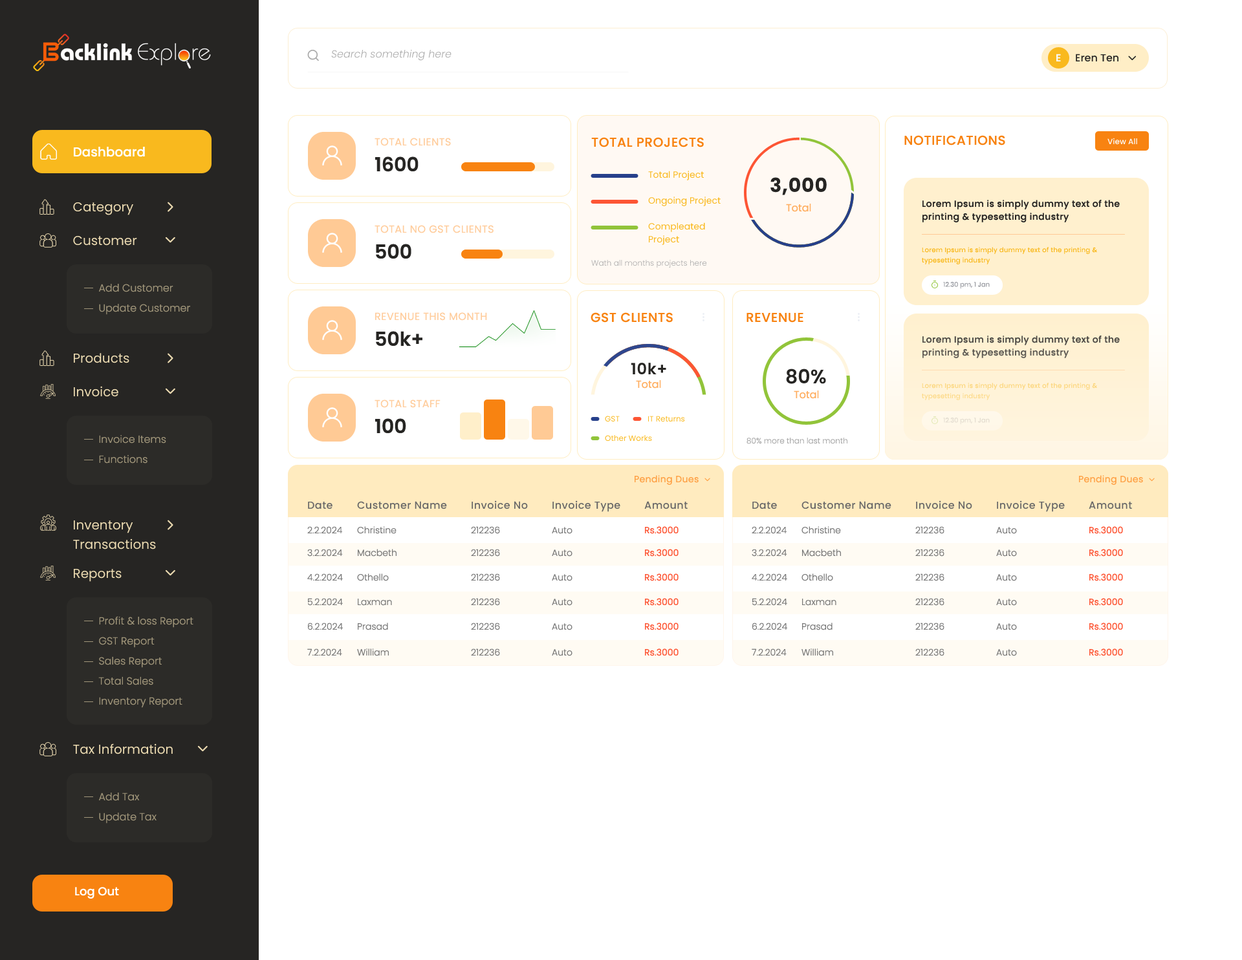
<style>
.page{position:relative;width:1242px;height:960px;background:#ffffff}
.page>*{position:absolute;margin:0}
.t1{font:10.3px "Poppins-LightItalic";color:#aaaaaa}
.t2{font:10.3px "Poppins-SemiBold";color:#f7f9fd}
.t3{font:10.3px "Poppins-Medium";color:#262523}
.t4{font:10.3px "Poppins-Regular";letter-spacing:0.03em;color:#ffcd9d;text-transform:uppercase}
.t5{font:12.9px "Poppins-Medium";letter-spacing:0.03em;color:#f88311;text-transform:uppercase}
.t6{font:7.8px "Poppins-Medium";color:#fcfdfe}
.t7{font:12.9px "Poppins-Medium";color:#ffffff}
.t8{font:19.4px "Poppins-SemiBold";color:#262523}
.t9{font:9.1px "Poppins-Regular";color:#f9b91e}
.t10{font:19.4px "Poppins-Bold";letter-spacing:0.03em;color:#262523}
.t11{font:12.9px "Poppins-Regular";color:#eddcb2}
.t12{font:10.3px "Poppins-Regular";color:#ffae60}
.t13{font:9.1px/12.9px "Poppins-Medium";letter-spacing:0.03em;color:#262523}
.t14{font:9.1px/12.9px "Poppins-Regular";color:#f9b91e}
.t15{font:6.5px/10.3px "Poppins-Regular";letter-spacing:0.03em;color:#f9b91e}
.t16{font:7.8px "Poppins-Light";color:#aaaaaa}
.t17{font:6.5px "Poppins-Regular";color:#9b9da3}
.t18{font:10.3px "Poppins-Light";color:#a1967a}
.t19{font:9.1px/12.9px "Poppins-Medium";letter-spacing:0.03em;color:#504d48}
.t20{font:15.5px "Poppins-SemiBold";letter-spacing:0.03em;color:#262523}
.t21{font:6.5px/10.3px "Poppins-Regular";letter-spacing:0.03em;color:#fcd67e}
.t22{font:7.8px "Poppins-Regular";color:#f9b91e}
.t23{font:6.5px "Poppins-Regular";color:#e3dccf}
.t24{font:9.1px "Poppins-Regular";letter-spacing:0.03em;color:#fea044}
.t25{font:9.1px "Poppins-Regular";letter-spacing:0.03em;color:#ffa044}
.t26{font:10.3px "Poppins-Medium";letter-spacing:0.03em;color:#686868}
.t27{font:12.9px/19.4px "Poppins-Regular";color:#eddcb2}
.t28{font:9.1px "Poppins-Light";color:#777777}
.t29{font:9.1px "Poppins-Regular";color:#fd5534}
.t30{font:11.6px "Poppins-Medium";color:#ffffff}
</style>
<div class="page">
<p class="t1" style="left:331px;top:50px;width:120px;height:11px">Search something here</p>
<p class="t2" style="left:1056px;top:54px;width:5px;height:7px">E</p>
<p class="t3" style="left:1075px;top:54px;width:43px;height:8px">Eren Ten</p>
<p class="t4" style="left:374px;top:138px;width:77px;height:8px">Total Clients</p>
<p class="t5" style="left:591px;top:137px;width:113px;height:10px">Total projects</p>
<p class="t5" style="left:904px;top:135px;width:101px;height:11px">notifications</p>
<p class="t6" style="left:1107px;top:138px;width:30px;height:6px">View All</p>
<p class="t7" style="left:74px;top:147px;width:71px;height:10px">Dashboard</p>
<p class="t8" style="left:375px;top:157px;width:43px;height:15px">1600</p>
<p class="t9" style="left:648px;top:171px;width:56px;height:9px">Total Project</p>
<p class="t10" style="left:770px;top:177px;width:56px;height:18px">3,000</p>
<p class="t9" style="left:648px;top:197px;width:72px;height:9px">Ongoing Project</p>
<p class="t11" style="left:73px;top:202px;width:60px;height:13px">Category</p>
<p class="t12" style="left:786px;top:204px;width:25px;height:8px">Total</p>
<p class="t13" style="left:922px;top:200px;width:197px;height:22px">Lorem Ipsum is simply dummy text of the<br>printing &amp; typesetting industry</p>
<p class="t4" style="left:374px;top:225px;width:119px;height:8px">Total no gst clients</p>
<p class="t14" style="left:648px;top:222px;width:57px;height:23px">Compleated<br>Project</p>
<p class="t11" style="left:73px;top:236px;width:64px;height:10px">Customer</p>
<p class="t8" style="left:376px;top:244px;width:35px;height:15px">500</p>
<p class="t15" style="left:922px;top:247px;width:175px;height:18px">Lorem Ipsum is simply dummy text of the printing &amp;<br>typesetting industry</p>
<p class="t16" style="left:591px;top:260px;width:116px;height:8px">Wath all months projects here</p>
<p class="t17" style="left:943px;top:282px;width:46px;height:7px">12.30 pm, 1 Jan</p>
<p class="t18" style="left:99px;top:284px;width:74px;height:8px">Add Customer</p>
<p class="t18" style="left:99px;top:304px;width:91px;height:11px">Update Customer</p>
<p class="t4" style="left:375px;top:312px;width:112px;height:9px">Revenue this month</p>
<p class="t5" style="left:590px;top:312px;width:83px;height:11px">gst clients</p>
<p class="t5" style="left:746px;top:313px;width:57px;height:10px">revenue</p>
<p class="t8" style="left:376px;top:331px;width:46px;height:15px">50k+</p>
<p class="t19" style="left:922px;top:336px;width:197px;height:22px">Lorem Ipsum is simply dummy text of the<br>printing &amp; typesetting industry</p>
<p class="t11" style="left:74px;top:353px;width:55px;height:10px">Products</p>
<p class="t20" style="left:631px;top:363px;width:35px;height:11px">10k+</p>
<p class="t8" style="left:786px;top:369px;width:40px;height:15px">80%</p>
<p class="t11" style="left:74px;top:386px;width:44px;height:11px">Invoice</p>
<p class="t12" style="left:636px;top:380px;width:25px;height:9px">Total</p>
<p class="t21" style="left:922px;top:383px;width:175px;height:17px">Lorem Ipsum is simply dummy text of the printing &amp;<br>typesetting industry</p>
<p class="t4" style="left:374px;top:400px;width:66px;height:8px">Total staff</p>
<p class="t12" style="left:794px;top:391px;width:25px;height:8px">Total</p>
<p class="t8" style="left:375px;top:418px;width:31px;height:15px">100</p>
<p class="t22" style="left:605px;top:416px;width:15px;height:6px">GST</p>
<p class="t22" style="left:648px;top:416px;width:37px;height:6px">IT Returns</p>
<p class="t23" style="left:943px;top:418px;width:46px;height:7px">12.30 pm, 1 Jan</p>
<p class="t18" style="left:99px;top:435px;width:67px;height:9px">Invoice Items</p>
<p class="t22" style="left:605px;top:435px;width:47px;height:6px">Other Works</p>
<p class="t16" style="left:746px;top:438px;width:101px;height:6px">80% more than last month</p>
<p class="t18" style="left:99px;top:455px;width:48px;height:9px">Functions</p>
<p class="t24" style="left:634px;top:475px;width:64px;height:10px">Pending Dues</p>
<p class="t25" style="left:1079px;top:475px;width:64px;height:10px">Pending Dues</p>
<p class="t26" style="left:308px;top:502px;width:24px;height:8px">Date</p>
<p class="t26" style="left:357px;top:501px;width:90px;height:9px">Customer Name</p>
<p class="t26" style="left:471px;top:501px;width:57px;height:9px">Invoice No</p>
<p class="t26" style="left:552px;top:501px;width:68px;height:11px">Invoice Type</p>
<p class="t26" style="left:644px;top:501px;width:43px;height:9px">Amount</p>
<p class="t26" style="left:752px;top:502px;width:25px;height:8px">Date</p>
<p class="t26" style="left:801px;top:501px;width:90px;height:9px">Customer Name</p>
<p class="t26" style="left:916px;top:501px;width:56px;height:9px">Invoice No</p>
<p class="t26" style="left:997px;top:501px;width:67px;height:11px">Invoice Type</p>
<p class="t26" style="left:1088px;top:501px;width:44px;height:9px">Amount</p>
<p class="t27" style="left:73px;top:521px;width:83px;height:29px">Inventory<br>Transactions</p>
<p class="t28" style="left:307px;top:526px;width:35px;height:8px">2.2.2024</p>
<p class="t28" style="left:357px;top:526px;width:39px;height:8px">Christine</p>
<p class="t28" style="left:471px;top:526px;width:29px;height:8px">212236</p>
<p class="t28" style="left:552px;top:527px;width:20px;height:7px">Auto</p>
<p class="t29" style="left:645px;top:526px;width:33px;height:8px">Rs.3000</p>
<p class="t28" style="left:751px;top:526px;width:35px;height:8px">2.2.2024</p>
<p class="t28" style="left:801px;top:526px;width:40px;height:8px">Christine</p>
<p class="t28" style="left:915px;top:526px;width:29px;height:8px">212236</p>
<p class="t28" style="left:996px;top:527px;width:21px;height:7px">Auto</p>
<p class="t29" style="left:1089px;top:526px;width:34px;height:8px">Rs.3000</p>
<p class="t28" style="left:307px;top:549px;width:36px;height:8px">3.2.2024</p>
<p class="t28" style="left:358px;top:549px;width:38px;height:8px">Macbeth</p>
<p class="t28" style="left:471px;top:549px;width:29px;height:8px">212236</p>
<p class="t28" style="left:552px;top:550px;width:20px;height:7px">Auto</p>
<p class="t29" style="left:645px;top:549px;width:33px;height:8px">Rs.3000</p>
<p class="t28" style="left:751px;top:549px;width:36px;height:8px">3.2.2024</p>
<p class="t28" style="left:802px;top:549px;width:39px;height:8px">Macbeth</p>
<p class="t28" style="left:915px;top:549px;width:29px;height:8px">212236</p>
<p class="t28" style="left:996px;top:550px;width:21px;height:7px">Auto</p>
<p class="t29" style="left:1089px;top:549px;width:34px;height:8px">Rs.3000</p>
<p class="t11" style="left:74px;top:569px;width:48px;height:13px">Reports</p>
<p class="t28" style="left:307px;top:574px;width:36px;height:7px">4.2.2024</p>
<p class="t28" style="left:357px;top:574px;width:32px;height:7px">Othello</p>
<p class="t28" style="left:471px;top:574px;width:29px;height:7px">212236</p>
<p class="t28" style="left:552px;top:574px;width:20px;height:7px">Auto</p>
<p class="t29" style="left:645px;top:574px;width:33px;height:7px">Rs.3000</p>
<p class="t28" style="left:751px;top:574px;width:36px;height:7px">4.2.2024</p>
<p class="t28" style="left:801px;top:574px;width:32px;height:7px">Othello</p>
<p class="t28" style="left:915px;top:574px;width:29px;height:7px">212236</p>
<p class="t28" style="left:996px;top:574px;width:21px;height:7px">Auto</p>
<p class="t29" style="left:1089px;top:574px;width:34px;height:7px">Rs.3000</p>
<p class="t28" style="left:308px;top:598px;width:35px;height:8px">5.2.2024</p>
<p class="t28" style="left:358px;top:599px;width:34px;height:7px">Laxman</p>
<p class="t28" style="left:471px;top:598px;width:29px;height:8px">212236</p>
<p class="t28" style="left:552px;top:599px;width:20px;height:7px">Auto</p>
<p class="t29" style="left:645px;top:598px;width:33px;height:8px">Rs.3000</p>
<p class="t28" style="left:752px;top:598px;width:35px;height:8px">5.2.2024</p>
<p class="t28" style="left:802px;top:599px;width:34px;height:7px">Laxman</p>
<p class="t28" style="left:915px;top:598px;width:29px;height:8px">212236</p>
<p class="t28" style="left:996px;top:599px;width:21px;height:7px">Auto</p>
<p class="t29" style="left:1089px;top:598px;width:34px;height:8px">Rs.3000</p>
<p class="t18" style="left:99px;top:616px;width:94px;height:12px">Profit &amp; loss Report</p>
<p class="t28" style="left:308px;top:623px;width:35px;height:8px">6.2.2024</p>
<p class="t28" style="left:358px;top:623px;width:30px;height:8px">Prasad</p>
<p class="t28" style="left:471px;top:623px;width:29px;height:8px">212236</p>
<p class="t28" style="left:552px;top:623px;width:20px;height:8px">Auto</p>
<p class="t29" style="left:645px;top:623px;width:33px;height:8px">Rs.3000</p>
<p class="t28" style="left:752px;top:623px;width:35px;height:8px">6.2.2024</p>
<p class="t28" style="left:802px;top:623px;width:30px;height:8px">Prasad</p>
<p class="t28" style="left:915px;top:623px;width:29px;height:8px">212236</p>
<p class="t28" style="left:996px;top:623px;width:21px;height:8px">Auto</p>
<p class="t29" style="left:1089px;top:623px;width:34px;height:8px">Rs.3000</p>
<p class="t18" style="left:99px;top:637px;width:56px;height:11px">GST Report</p>
<p class="t28" style="left:307px;top:649px;width:35px;height:7px">7.2.2024</p>
<p class="t28" style="left:357px;top:649px;width:32px;height:7px">William</p>
<p class="t28" style="left:471px;top:649px;width:29px;height:7px">212236</p>
<p class="t28" style="left:552px;top:649px;width:20px;height:7px">Auto</p>
<p class="t29" style="left:645px;top:649px;width:33px;height:7px">Rs.3000</p>
<p class="t28" style="left:751px;top:649px;width:35px;height:7px">7.2.2024</p>
<p class="t28" style="left:801px;top:649px;width:32px;height:7px">William</p>
<p class="t28" style="left:915px;top:649px;width:29px;height:7px">212236</p>
<p class="t28" style="left:996px;top:649px;width:21px;height:7px">Auto</p>
<p class="t29" style="left:1089px;top:649px;width:34px;height:7px">Rs.3000</p>
<p class="t18" style="left:99px;top:657px;width:63px;height:11px">Sales Report</p>
<p class="t18" style="left:98px;top:677px;width:55px;height:9px">Total Sales</p>
<p class="t18" style="left:99px;top:697px;width:83px;height:11px">Inventory Report</p>
<p class="t11" style="left:73px;top:744px;width:100px;height:11px">Tax Information</p>
<p class="t18" style="left:99px;top:793px;width:41px;height:8px">Add Tax</p>
<p class="t18" style="left:99px;top:813px;width:58px;height:11px">Update Tax</p>
<p class="t30" style="left:75px;top:887px;width:44px;height:12px">Log Out</p>
</div>
